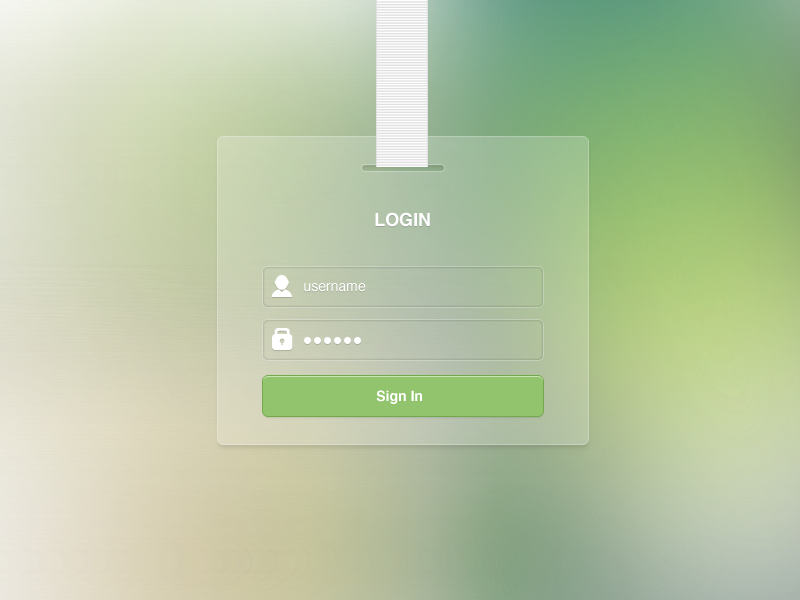
<style>
.page{position:relative;width:800px;height:600px}
.page>*{position:absolute;margin:0}
.t1{font:18px "Helvetica-Bold";color:#ffffff}
.t2{font:14px "Helvetica";color:#ffffff}
.t3{font:14px "Helvetica-Bold";color:#ffffff}
</style>
<div class="page">
<p class="t1" style="left:375px;top:212px;width:55px;height:15px">LOGIN</p>
<p class="t2" style="left:304px;top:283px;width:62px;height:9px">username</p>
<p class="t3" style="left:376px;top:390px;width:46px;height:14px">Sign In</p>
</div>
